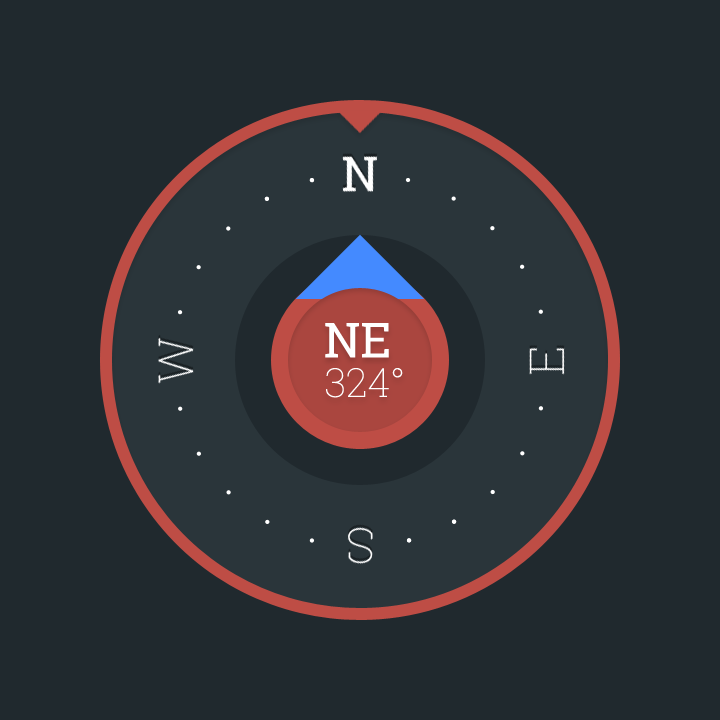
<style>
.page{position:relative;width:720px;height:720px;background:#20292e}
.page>*{position:absolute;margin:0}
.t1{font:47.9px "RobotoSlab-Regular";color:#ffffff}
.t2{font:48px "RobotoSlab-Regular";color:#ffffff}
.t3{font:48px "RobotoSlab-Thin";color:#ffffff}
.t4{font:47.6px "RobotoSlab-Thin";color:#ffffff}
.t5{font:40px "RobotoSlab-Thin";color:#ffffff}
.t6{font:47.5px "RobotoSlab-Thin";color:#ffffff;scale:1.04 1}
</style>
<div class="page">
<p class="t1" style="left:342px;top:155px;width:36px;height:38px">N</p>
<p class="t2" style="left:325px;top:323px;width:64px;height:35px">NE</p>
<p class="t3" style="left:157px;top:337px;width:37px;height:47px;rotate:-90deg">W</p>
<p class="t4" style="left:529px;top:347px;width:36px;height:28px;rotate:-90deg">E</p>
<p class="t5" style="left:326px;top:368px;width:77px;height:30px">324°</p>
<p class="t6" style="left:347px;top:527px;width:27px;height:38px;rotate:180deg">S</p>
</div>
